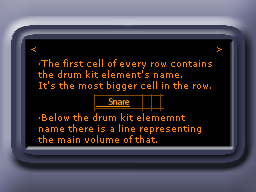
<style>
.page{position:relative;width:256px;height:192px;background:#000000}
.page>*{position:absolute;margin:0}
.t1{font:9px "MSReferenceSansSerif";color:#ff8400}
</style>
<div class="page">
<p class="t1" style="left:31px;top:47px;width:5px;height:5px">&lt;</p>
<p class="t1" style="left:217px;top:47px;width:5px;height:5px">&gt;</p>
<p class="t1" style="left:38px;top:59px;width:174px;height:84px">·The first cell of every row contains<br>the drum kit element's name. <br>It's the most bigger cell in the row.<br><br><br>·Below the drum kit elememnt<br>name there is a line representing<br>the main volume of that.</p>
</div>
